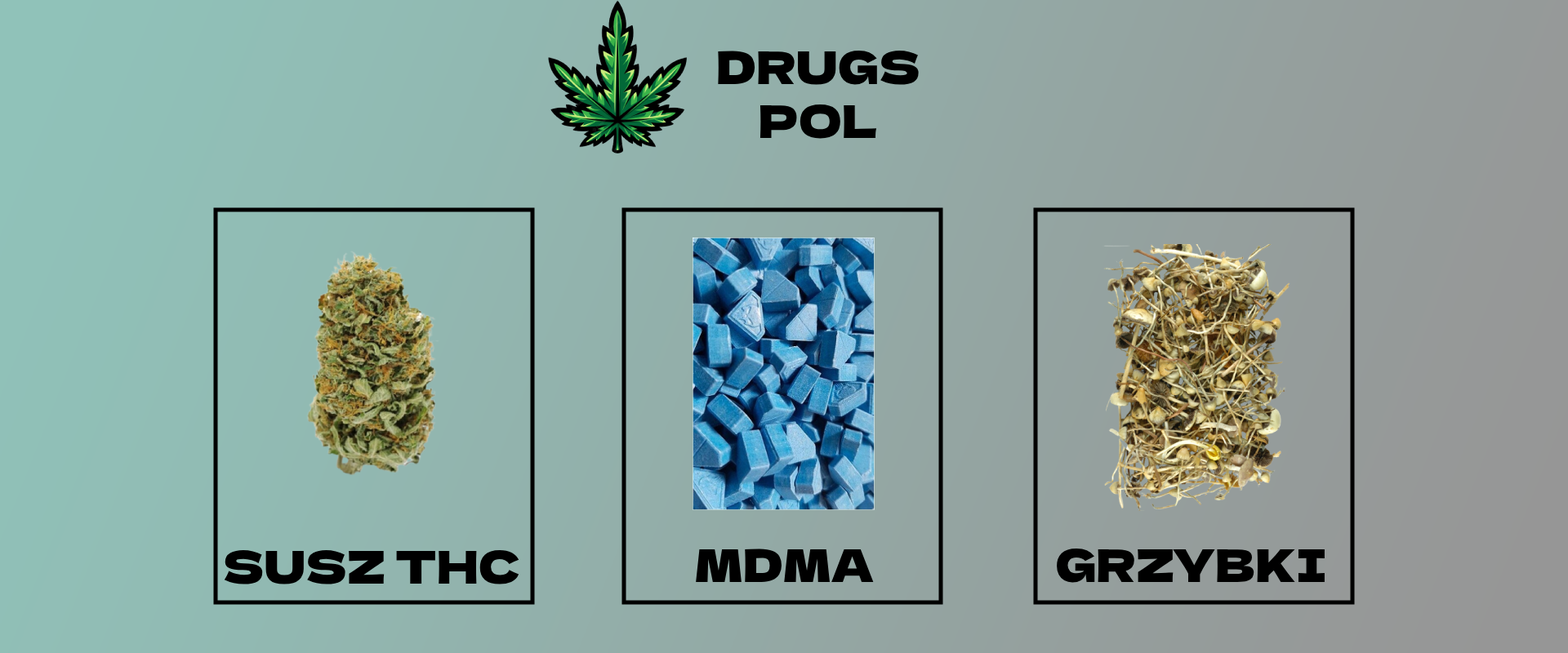
<style>
.page{position:relative;width:1568px;height:653px}
.page>*{position:absolute;margin:0}
.t1{font:44.9px "DelaGothicOne-Regular";color:#000000}
</style>
<div class="page">
<p class="t1" style="left:718px;top:50px;width:201px;height:89px;text-align:center">DRUGS<br>POL</p>
<p class="t1" style="left:224px;top:550px;width:295px;height:35px">SUSZ THC</p>
<p class="t1" style="left:696px;top:549px;width:178px;height:33px">MDMA</p>
<p class="t1" style="left:1057px;top:548px;width:268px;height:35px">GRZYBKI</p>
</div>
